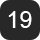
<style>
.page{position:relative;width:40px;height:40px;background:#282828}
.page>*{position:absolute;margin:0}
.t1{font:23.3px "ArialMT";color:#ffffff}
</style>
<div class="page">
<p class="t1" style="left:8px;top:11px;width:24px;height:17px">19</p>
</div>
